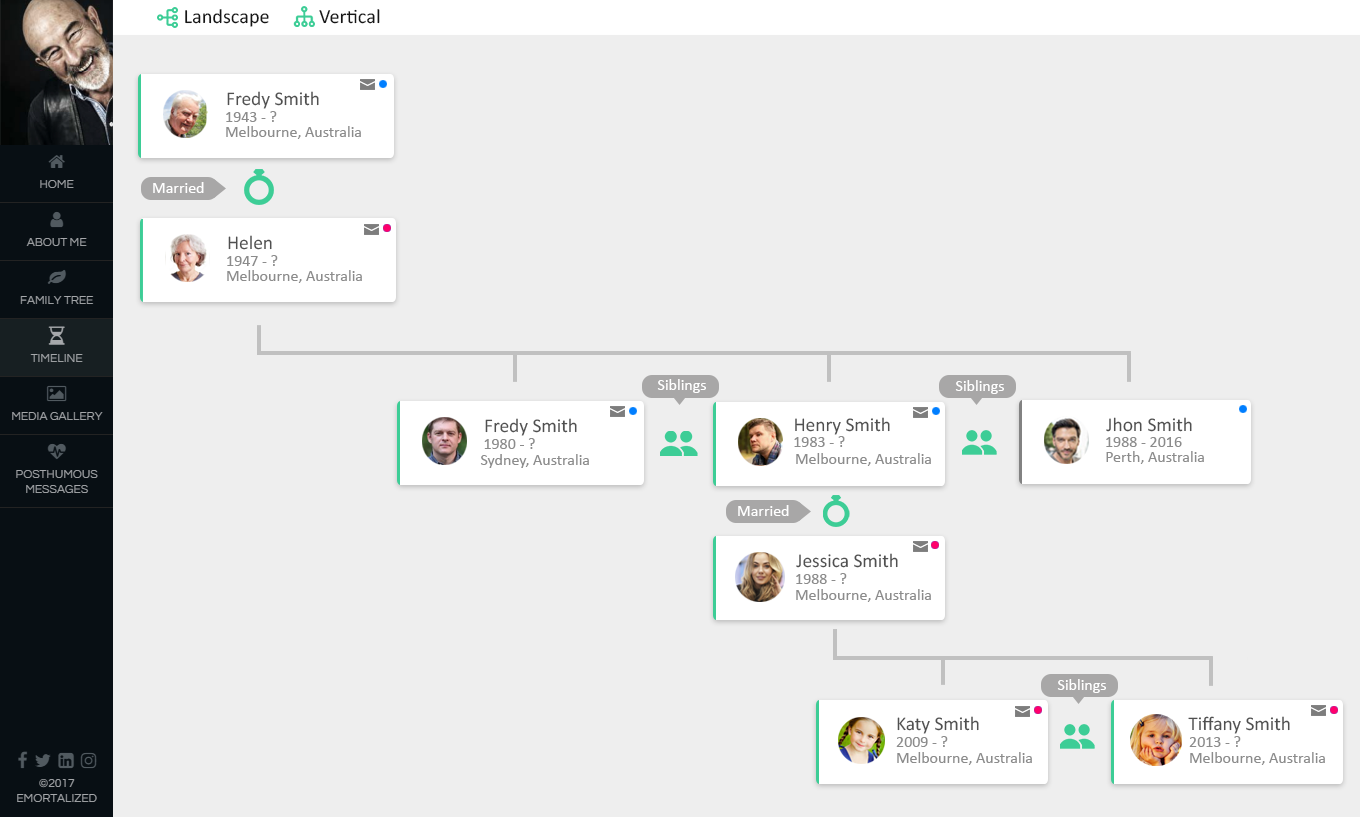
<style>
.page{position:relative;width:1360px;height:817px;background:#eeeeee}
.page>*{position:absolute;margin:0}
.t1{font:20.3px "Calibri";color:#161616}
.t2{font:19.5px "Calibri";color:#505050}
.t3{font:16px "Calibri";color:#8c8c8c}
.t4{font:16px "Calibri";color:#ffffff}
.t5{font:12px "Calibri";color:#8c8c8c}
</style>
<div class="page">
<p class="t1" style="left:185px;top:9px;width:84px;height:18px">Landscape</p>
<p class="t1" style="left:319px;top:9px;width:61px;height:15px">Vertical</p>
<p class="t2" style="left:227px;top:91px;width:92px;height:18px">Fredy Smith</p>
<p class="t3" style="left:226px;top:111px;width:51px;height:11px">1943 - ?</p>
<p class="t3" style="left:226px;top:126px;width:135px;height:13px">Melbourne, Australia</p>
<p class="t4" style="left:153px;top:182px;width:51px;height:11px">Married</p>
<p class="t2" style="left:228px;top:235px;width:44px;height:15px">Helen</p>
<p class="t3" style="left:227px;top:255px;width:51px;height:11px">1947 - ?</p>
<p class="t3" style="left:227px;top:270px;width:135px;height:13px">Melbourne, Australia</p>
<p class="t4" style="left:657px;top:379px;width:49px;height:14px">Siblings</p>
<p class="t4" style="left:955px;top:380px;width:49px;height:14px">Siblings</p>
<p class="t2" style="left:485px;top:418px;width:92px;height:18px">Fredy Smith</p>
<p class="t2" style="left:795px;top:417px;width:95px;height:18px">Henry Smith</p>
<p class="t2" style="left:1106px;top:417px;width:86px;height:15px">Jhon Smith</p>
<p class="t3" style="left:484px;top:438px;width:51px;height:11px">1980 - ?</p>
<p class="t3" style="left:794px;top:436px;width:51px;height:11px">1983 - ?</p>
<p class="t3" style="left:1106px;top:437px;width:76px;height:10px">1988 - 2016</p>
<p class="t3" style="left:480px;top:454px;width:109px;height:14px">Sydney, Australia</p>
<p class="t3" style="left:796px;top:453px;width:135px;height:13px">Melbourne, Australia</p>
<p class="t5" style="left:1106px;top:451px;width:98px;height:13px">Perth, Australia</p>
<p class="t4" style="left:738px;top:505px;width:51px;height:11px">Married</p>
<p class="t2" style="left:796px;top:553px;width:102px;height:15px">Jessica Smith</p>
<p class="t3" style="left:796px;top:573px;width:51px;height:11px">1988 - ?</p>
<p class="t3" style="left:796px;top:589px;width:135px;height:13px">Melbourne, Australia</p>
<p class="t4" style="left:1057px;top:679px;width:49px;height:14px">Siblings</p>
<p class="t2" style="left:897px;top:716px;width:82px;height:18px">Katy Smith</p>
<p class="t2" style="left:1188px;top:716px;width:102px;height:18px">Tiffany Smith</p>
<p class="t3" style="left:896px;top:736px;width:52px;height:11px">2009 - ?</p>
<p class="t3" style="left:1189px;top:736px;width:52px;height:11px">2013 - ?</p>
<p class="t3" style="left:897px;top:752px;width:135px;height:13px">Melbourne, Australia</p>
<p class="t3" style="left:1190px;top:752px;width:135px;height:13px">Melbourne, Australia</p>
</div>
